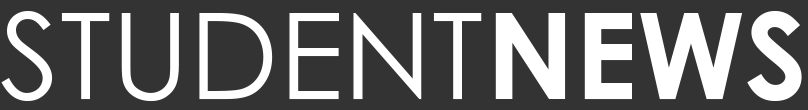
<style>
.page{position:relative;width:808px;height:110px;background:#333333}
.page>*{position:absolute;margin:0}
.t1{font:120px "CenturyGothic";color:#ffffff}
.t2{font:120px "CenturyGothic-Bold";color:#ffffff}
</style>
<div class="page">
<p class="t1" style="left:1px;top:11px;width:481px;height:90px">STUDENT</p>
<p class="t2" style="left:495px;top:11px;width:307px;height:90px">NEWS</p>
</div>
